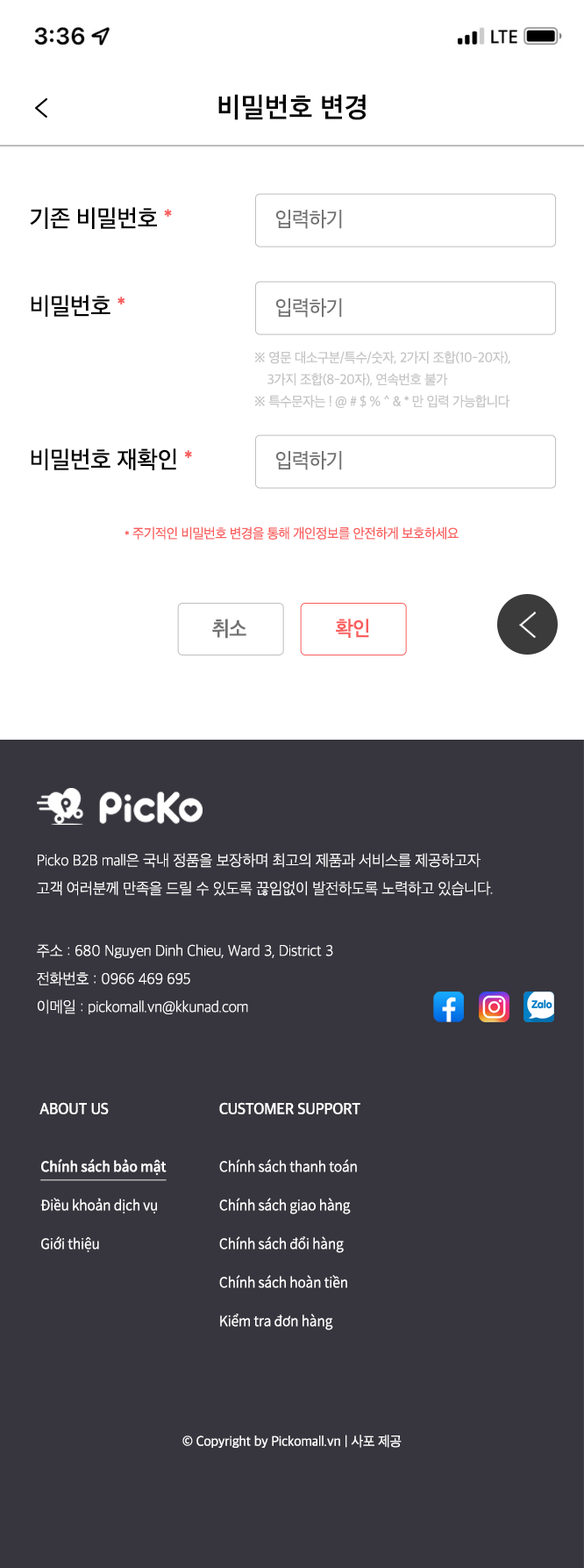
<style>
.page{position:relative;width:584px;height:1568px;background:#37363e}
.page>*{position:absolute;margin:0}
.t1{font:28.1px "AppleSDGothicNeo-SemiBold";letter-spacing:0.017em;color:#000000}
.t2{font:24.6px "AppleSDGothicNeo-Medium";letter-spacing:-0.01em;color:#000000;scale:0.97 1}
.t3{font:24.6px "AppleSDGothicNeo-Medium";letter-spacing:-0.01em;color:#fa5e5e;scale:0.97 1}
.t4{font:21.1px "AppleSDGothicNeo-Regular";letter-spacing:-0.022em;color:#727272;scale:0.96 1}
.t5{font:14px/21.9px "AppleSDGothicNeo-Regular";letter-spacing:-0.022em;color:#c5c5c5;scale:0.96 1}
.t6{font:14px "AppleSDGothicNeo-Regular";letter-spacing:-0.022em;color:#fa5e5e;scale:0.96 1}
.t7{font:21.1px "AppleSDGothicNeo-SemiBold";letter-spacing:-0.022em;color:#727272;scale:0.96 1}
.t8{font:21.1px "AppleSDGothicNeo-SemiBold";letter-spacing:-0.022em;color:#fa5e5e;scale:0.96 1}
.t9{font:15.8px/28.1px "AppleSDGothicNeo-UltraLight";letter-spacing:-0.01em;color:#ffffff;scale:0.97 1}
.t10{font:15.8px "AppleSDGothicNeo-SemiBold";letter-spacing:-0.01em;color:#ffffff;scale:0.97 1}
.t11{font:15.8px "AppleSDGothicNeo-SemiBold";letter-spacing:-0.01em;color:#ffffff;text-transform:uppercase;scale:0.97 1}
.t12{font:14px/38.6px "NotoSansCJKkr-DemiLight";letter-spacing:-0.01em;color:#ffffff;scale:0.97 1}
.t13{font:14px/38.6px "NotoSansCJKkr-Medium";letter-spacing:-0.01em;color:#ffffff;text-decoration:underline;scale:0.97 1}
.t14{font:14px "AppleSDGothicNeo-Regular";letter-spacing:-0.01em;color:#ffffff;scale:0.97 1}
</style>
<div class="page">
<p class="t1" style="left:218px;top:94px;width:148px;height:26px">비밀번호 변경</p>
<p class="t2" style="left:30px;top:207px;width:142px;height:22px">기존 비밀번호 <span class="t3">*</span></p>
<p class="t4" style="left:276px;top:210px;width:66px;height:19px">입력하기</p>
<p class="t2" style="left:31px;top:295px;width:94px;height:22px">비밀번호 <span class="t3">*</span></p>
<p class="t4" style="left:276px;top:298px;width:66px;height:20px">입력하기</p>
<p class="t5" style="left:254px;top:351px;width:257px;height:57px">※ 영문 대소구분/특수/숫자, 2가지 조합(10-20자),<br>    3가지 조합(8-20자), 연속번호 불가<br>※ 특수문자는 ! @ # $ % ^ &amp; * 만 입력 가능합니다</p>
<p class="t2" style="left:31px;top:448px;width:161px;height:22px">비밀번호 재확인 <span class="t3">*</span></p>
<p class="t4" style="left:276px;top:451px;width:66px;height:19px">입력하기</p>
<p class="t6" style="left:125px;top:526px;width:334px;height:14px">* 주기적인 비밀번호 변경을 통해 개인정보를 안전하게 보호하세요</p>
<p class="t7" style="left:212px;top:619px;width:35px;height:20px">취소</p>
<p class="t8" style="left:336px;top:619px;width:33px;height:19px">확인</p>
<p class="t9" style="left:37px;top:853px;width:456px;height:43px">Picko B2B mall은 국내 정품을 보장하며 최고의 제품과 서비스를 제공하고자<br>고객 여러분께 만족을 드릴 수 있도록 끊임없이 발전하도록 노력하고 있습니다.</p>
<p class="t9" style="left:37px;top:944px;width:296px;height:70px">주소 : 680 Nguyen Dinh Chieu, Ward 3, District 3<br>전화번호 : 0966 469 695<br>이메일 : pickomall.vn@kkunad.com</p>
<p class="t10" style="left:39px;top:1102px;width:70px;height:12px">ABOUT US</p>
<p class="t11" style="left:219px;top:1102px;width:142px;height:12px">Customer Support</p>
<p class="t12" style="left:40px;top:1158px;width:127px;height:94px"><span class="t13">Chính sách bảo mật<br></span>Điều khoản dịch vụ<br>Giới thiệu</p>
<p class="t12" style="left:219px;top:1159px;width:138px;height:171px">Chính sách thanh toán<br>Chính sách giao hàng<br>Chính sách đổi hàng<br>Chính sách hoàn tiền<br>Kiểm tra đơn hàng</p>
<p class="t14" style="left:183px;top:1435px;width:219px;height:13px">© Copyright by Pickomall.vn | 사포 제공</p>
</div>
